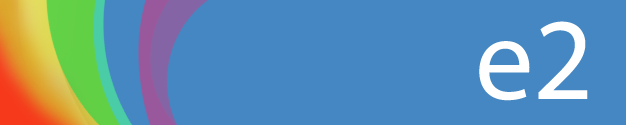
<style>
.page{position:relative;width:626px;height:125px;background:#4487c2}
.page>*{position:absolute;margin:0}
.t1{font:116.7px "MyriadPro-Regular";color:#ffffff}
</style>
<div class="page">
<p class="t1" style="left:479px;top:21px;width:109px;height:80px">e2</p>
</div>
